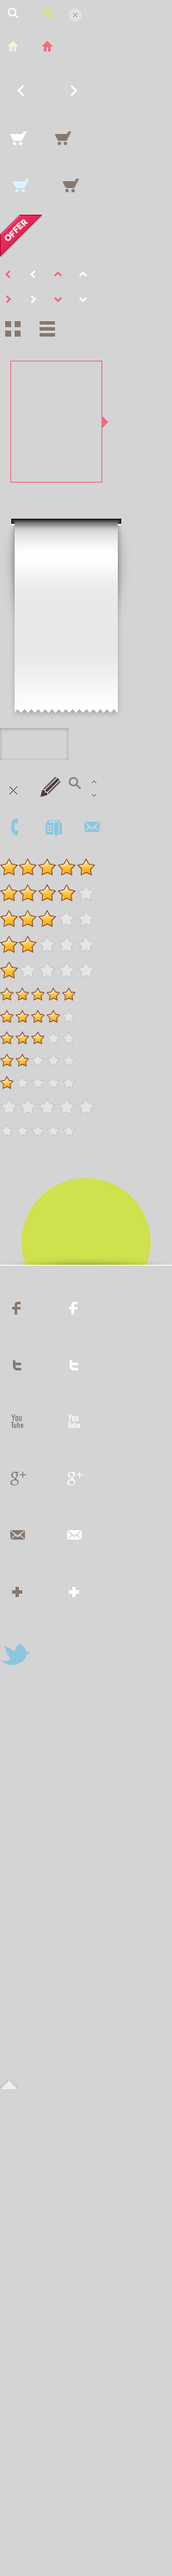
<style>
.page{position:relative;width:172px;height:2576px;background:#d4d4d4}
.page>*{position:absolute;margin:0}
.t1{font:8.6px "Novecentowide-DemiBold";color:#ffffff}
</style>
<div class="page">
<p class="t1" style="left:4px;top:219px;width:24px;height:22px;rotate:-45deg">offer</p>
</div>
